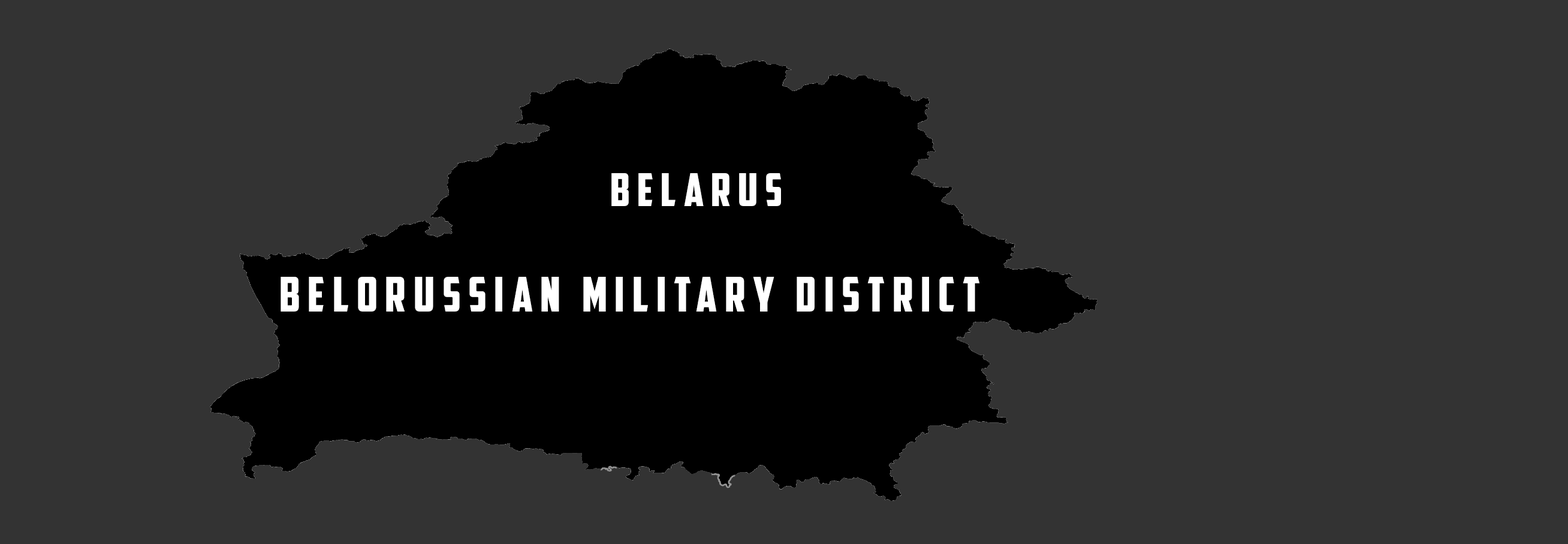
<style>
.page{position:relative;width:1568px;height:544px;background:#333333}
.page>*{position:absolute;margin:0}
.t1{font:45.6px "AmericanCaptain";letter-spacing:0.16em;color:#ffffff}
.t2{font:48px "AmericanCaptain";letter-spacing:0.16em;color:#ffffff}
</style>
<div class="page">
<p class="t1" style="left:611px;top:173px;width:170px;height:33px">Belarus</p>
<p class="t2" style="left:281px;top:277px;width:699px;height:35px">Belorussian military district</p>
</div>
